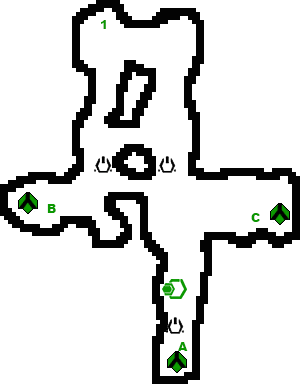
<style>
.page{position:relative;width:300px;height:384px;background:#ffffff}
.page>*{position:absolute;margin:0}
.t1{font:12px "Arial-Black";color:#0c9801}
</style>
<div class="page">
<p class="t1" style="left:101px;top:20px;width:5px;height:9px">1</p>
<p class="t1" style="left:47px;top:204px;width:9px;height:9px">B</p>
<p class="t1" style="left:251px;top:213px;width:9px;height:9px">C</p>
<p class="t1" style="left:178px;top:342px;width:10px;height:9px">A</p>
</div>
